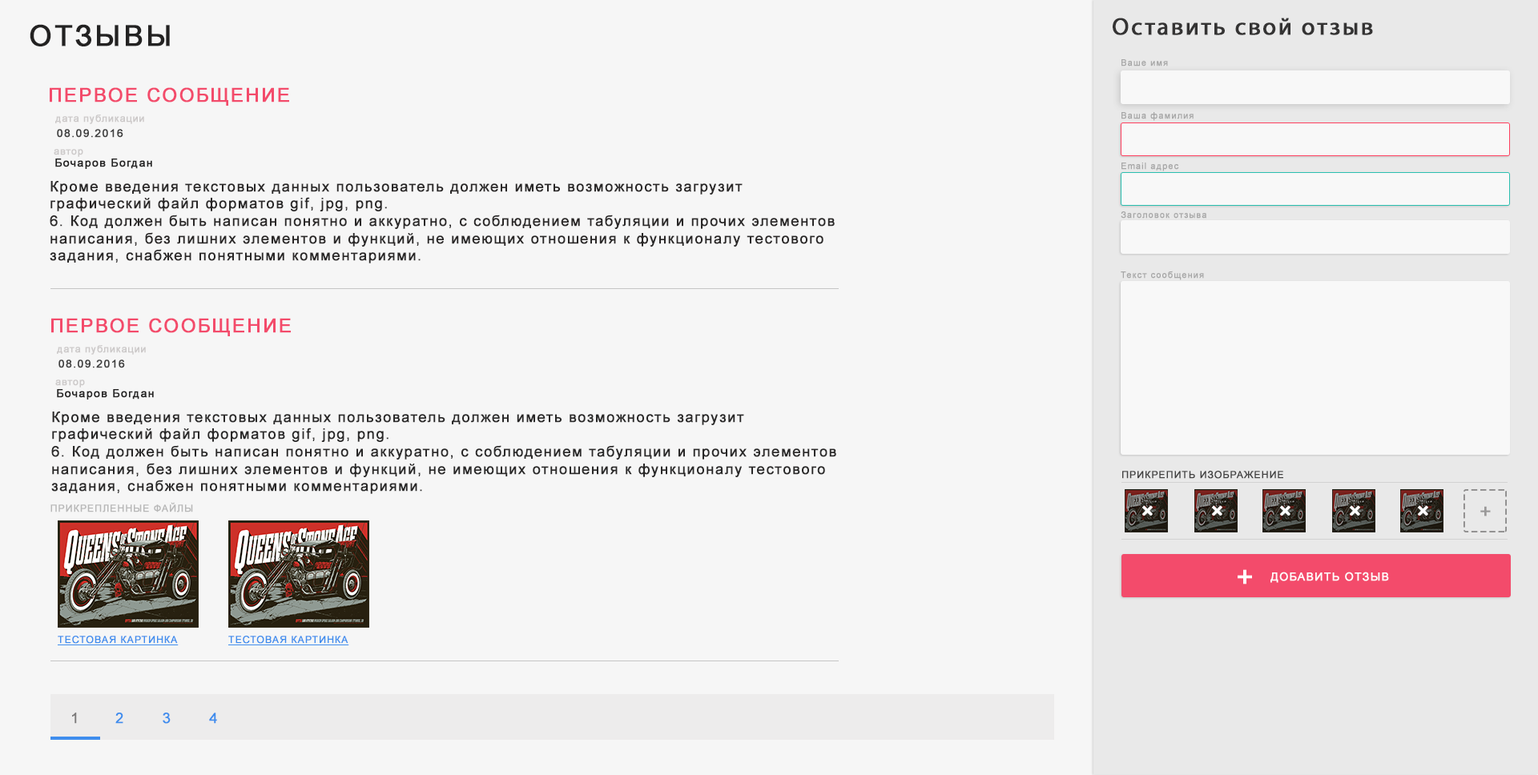
<style>
.page{position:relative;width:1538px;height:775px;background:#f6f6f6}
.page>*{position:absolute;margin:0}
.t1{font:24px "MyriadPro-Regular";letter-spacing:0.075em;color:#343333;font-weight:bold}
.t2{font:28.8px "ArialMT";letter-spacing:0.075em;color:#232222;font-weight:bold}
.t3{font:8.8px "ArialMT";letter-spacing:0.075em;color:#a7a7a7;font-weight:bold}
.t4{font:19.2px "ArialMT";letter-spacing:0.075em;color:#f34b6b;text-transform:uppercase;font-weight:bold}
.t5{font:9.6px "ArialMT";letter-spacing:0.075em;color:#ccc9c9;font-weight:bold}
.t6{font:11.2px "ArialMT";letter-spacing:0.075em;color:#404040;font-weight:bold}
.t7{font:11.2px "ArialMT";letter-spacing:0.075em;color:#232222;font-weight:bold}
.t8{font:14.4px "ArialMT";letter-spacing:0.075em;color:#292727;font-weight:bold}
.t9{font:9.6px "ArialMT";letter-spacing:0.075em;color:#414040;text-transform:uppercase;font-weight:bold}
.t10{font:9.6px "ArialMT";letter-spacing:0.075em;color:#b7b7b7;text-transform:uppercase;font-weight:bold}
.t11{font:24px "ArialMT";letter-spacing:0.075em;color:#ffffff;text-transform:uppercase;font-weight:bold}
.t12{font:19.2px "ArialMT";letter-spacing:0.075em;color:#999898;text-transform:uppercase;font-weight:bold}
.t13{font:28.8px "ArialMT";letter-spacing:0.075em;color:#fefefe;font-weight:bold}
.t14{font:11.2px "ArialMT";letter-spacing:0.075em;color:#ffffff;text-transform:uppercase;font-weight:bold}
.t15{font:9.6px "ArialMT";letter-spacing:0.075em;color:#3f8ded;text-transform:uppercase;font-weight:bold;text-decoration:underline}
.t16{font:14.4px "ArialMT";letter-spacing:0.075em;color:#7e7c7c;font-weight:bold}
.t17{font:14.4px "ArialMT";letter-spacing:0.075em;color:#3f8ded;font-weight:bold}
</style>
<div class="page">
<p class="t1" style="left:1113px;top:18px;width:260px;height:17px">Оставить свой отзыв</p>
<p class="t2" style="left:30px;top:24px;width:140px;height:22px">ОТЗЫВЫ</p>
<p class="t3" style="left:1121px;top:59px;width:47px;height:7px">Ваше имя</p>
<p class="t4" style="left:50px;top:87px;width:239px;height:19px">первое сообщение</p>
<p class="t3" style="left:1121px;top:112px;width:72px;height:9px">Ваша фамилия</p>
<p class="t5" style="left:55px;top:115px;width:89px;height:9px">дата публикации</p>
<p class="t6" style="left:57px;top:129px;width:66px;height:9px">08.09.2016</p>
<p class="t5" style="left:54px;top:149px;width:29px;height:8px">автор</p>
<p class="t7" style="left:55px;top:159px;width:97px;height:10px">Бочаров Богдан</p>
<p class="t3" style="left:1121px;top:163px;width:58px;height:8px">Email адрес</p>
<p class="t8" style="left:50px;top:181px;width:785px;height:83px">Кроме введения текстовых данных пользователь должен иметь возможность загрузит<br>графический файл форматов gif, jpg, png.<br>6. Код должен быть написан понятно и аккуратно, с соблюдением табуляции и прочих элементов <br>написания, без лишних элементов и функций, не имеющих отношения к функционалу тестового <br>задания, снабжен понятными комментариями.</p>
<p class="t3" style="left:1121px;top:211px;width:85px;height:8px">Заголовок отзыва</p>
<p class="t3" style="left:1121px;top:271px;width:83px;height:9px">Текст сообщения</p>
<p class="t4" style="left:51px;top:318px;width:240px;height:18px">первое сообщение</p>
<p class="t5" style="left:57px;top:345px;width:89px;height:10px">дата публикации</p>
<p class="t6" style="left:58px;top:360px;width:67px;height:8px">08.09.2016</p>
<p class="t5" style="left:55px;top:380px;width:30px;height:8px">автор</p>
<p class="t7" style="left:57px;top:389px;width:97px;height:11px">Бочаров Богдан</p>
<p class="t8" style="left:51px;top:412px;width:785px;height:82px">Кроме введения текстовых данных пользователь должен иметь возможность загрузит<br>графический файл форматов gif, jpg, png.<br>6. Код должен быть написан понятно и аккуратно, с соблюдением табуляции и прочих элементов <br>написания, без лишних элементов и функций, не имеющих отношения к функционалу тестового <br>задания, снабжен понятными комментариями.</p>
<p class="t9" style="left:1122px;top:471px;width:161px;height:8px">прикрепить изображение</p>
<p class="t10" style="left:50px;top:502px;width:143px;height:11px">прикрепленные файлы</p>
<p class="t11" style="left:1142px;top:505px;width:11px;height:11px;rotate:45deg">+</p>
<p class="t11" style="left:1212px;top:505px;width:10px;height:11px;rotate:45deg">+</p>
<p class="t11" style="left:1280px;top:505px;width:10px;height:11px;rotate:45deg">+</p>
<p class="t11" style="left:1350px;top:505px;width:10px;height:11px;rotate:45deg">+</p>
<p class="t11" style="left:1418px;top:505px;width:10px;height:11px;rotate:45deg">+</p>
<p class="t12" style="left:1480px;top:506px;width:11px;height:11px">+</p>
<p class="t13" style="left:1238px;top:570px;width:14px;height:15px">+</p>
<p class="t14" style="left:1270px;top:572px;width:119px;height:11px">добавить отзыв</p>
<p class="t15" style="left:58px;top:636px;width:121px;height:10px">тестоваЯ картинка</p>
<p class="t15" style="left:228px;top:636px;width:121px;height:10px">тестоваЯ картинка</p>
<p class="t16" style="left:72px;top:713px;width:5px;height:11px">1</p>
<p class="t17" style="left:115px;top:713px;width:8px;height:11px">2</p>
<p class="t17" style="left:163px;top:713px;width:8px;height:11px">3</p>
<p class="t17" style="left:209px;top:713px;width:8px;height:11px">4</p>
</div>
